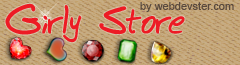
<style>
.page{position:relative;width:240px;height:65px}
.page>*{position:absolute;margin:0}
.t1{font:36px "BudHandBold";color:#ed1b24}
.t2{font:11px "ArialMT";color:#5a4a3e}
</style>
<div class="page">
<p class="t1" style="left:5px;top:3px;width:180px;height:40px">Girly Store</p>
<p class="t2" style="left:140px;top:2px;width:94px;height:10px">by webdevster.com</p>
</div>
